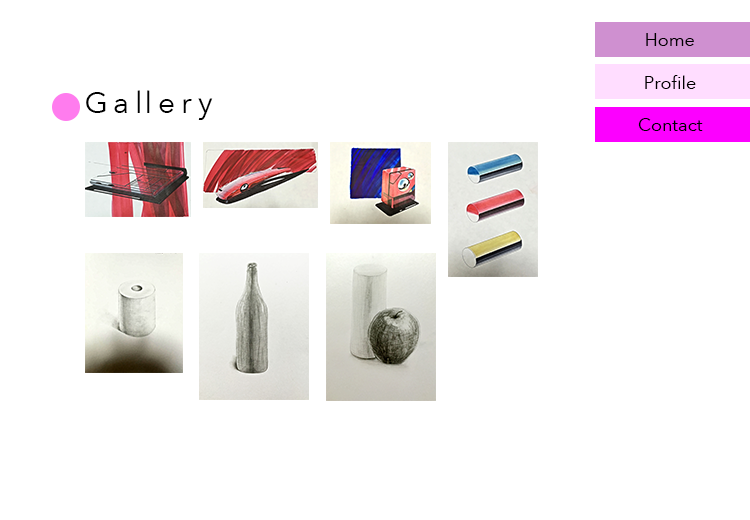
<style>
.page{position:relative;width:750px;height:520px;background:#ffffff}
.page>*{position:absolute;margin:0}
.t1{font:18px "AvenirNext-Regular";color:#000000}
.t2{font:30px "AvenirNext-Regular";color:#000000}
</style>
<div class="page">
<p class="t1" style="left:646px;top:33px;width:48px;height:13px">Home</p>
<p class="t1" style="left:645px;top:75px;width:51px;height:14px">Profile</p>
<p class="t2" style="left:86px;top:90px;width:127px;height:30px">Gallery</p>
<p class="t1" style="left:638px;top:118px;width:65px;height:13px">Contact</p>
</div>
